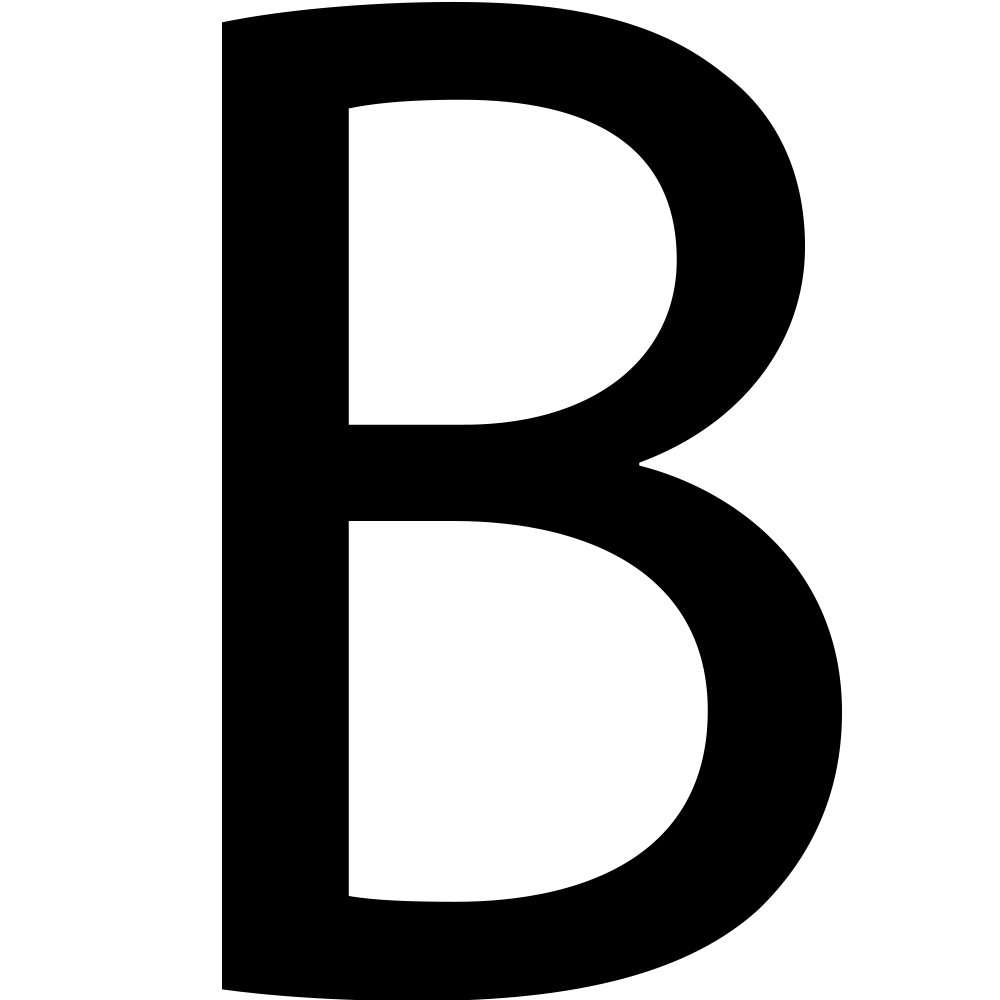
<style>
.page{position:relative;width:1000px;height:1000px;background:#ffffff}
.page>*{position:absolute;margin:0}
.t1{font:1458.3px "MyriadPro-Regular";color:#000000}
</style>
<div class="page">
<p class="t1" style="left:222px;top:1px;width:620px;height:1001px">B</p>
</div>
